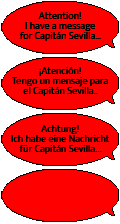
<style>
.page{position:relative;width:120px;height:224px;background:#ff0000}
.page>*{position:absolute;margin:0}
.t1{font:10px/10px "MuktaVaani-Regular";color:#000000}
</style>
<div class="page">
<p class="t1" style="left:11px;top:12px;width:99px;height:142px;text-align:center">Attention!<br>I have a message<br>for Capitán Sevilla…<br><br><br>¡Atención!<br>Tengo un mensaje para<br>el Capitán Sevilla..<br><br><br>Achtung!<br>Ich habe eine Nachricht<br>für Capitán Sevilla...</p>
</div>
